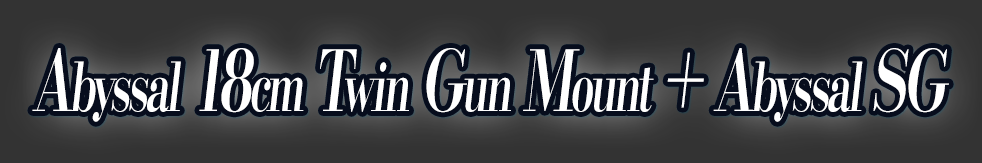
<style>
.page{position:relative;width:982px;height:163px;background:#333333}
.page>*{position:absolute;margin:0}
.t1{font:67.2px "KochoStd-Heavy";letter-spacing:-0.08em;color:#ffffff;font-style:italic;scale:0.65 1}
.t2{font:84px "KochoStd-Heavy";letter-spacing:-0.08em;color:#ffffff;font-style:italic;scale:0.65 1}
</style>
<div class="page">
<p class="t1" style="left:32px;top:48px;width:917px;height:74px"><span class="t2">A</span>byssal<span class="t2"> 18</span>cm<span class="t2"> T</span>win<span class="t2"> G</span>un<span class="t2"> M</span>ount<span class="t2"> + A</span>byssal <span class="t2">SG</span></p>
</div>
